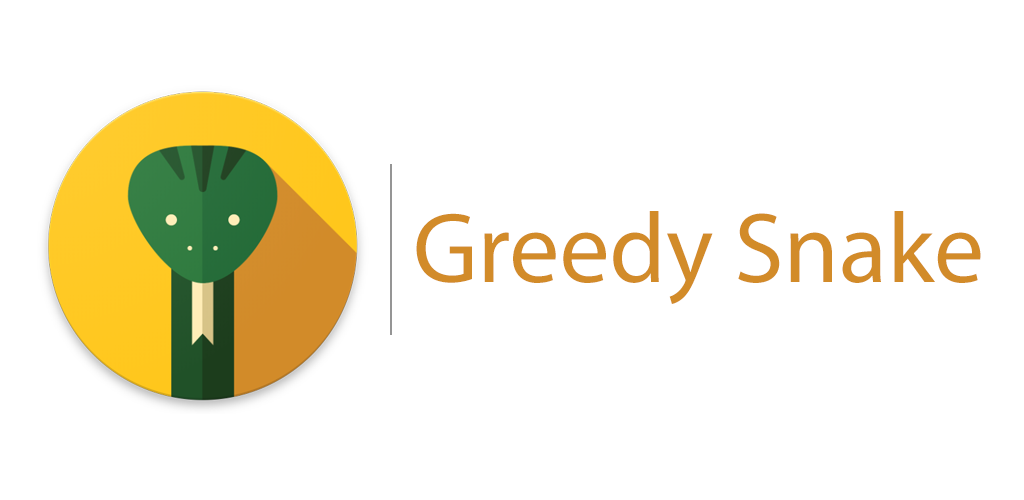
<style>
.page{position:relative;width:1024px;height:500px;background:#ffffff}
.page>*{position:absolute;margin:0}
.t1{font:100px "MyriadPro-Regular";color:#d28b29}
</style>
<div class="page">
<p class="t1" style="left:416px;top:211px;width:565px;height:93px">Greedy Snake</p>
</div>
